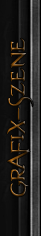
<style>
.page{position:relative;width:41px;height:236px}
.page>*{position:absolute;margin:0}
.t1{font:35px "Evanescent"}
</style>
<div class="page">
<p class="t1" style="left:7px;top:38px;width:26px;height:159px;rotate:-90deg">Grafix-Szene</p>
</div>
